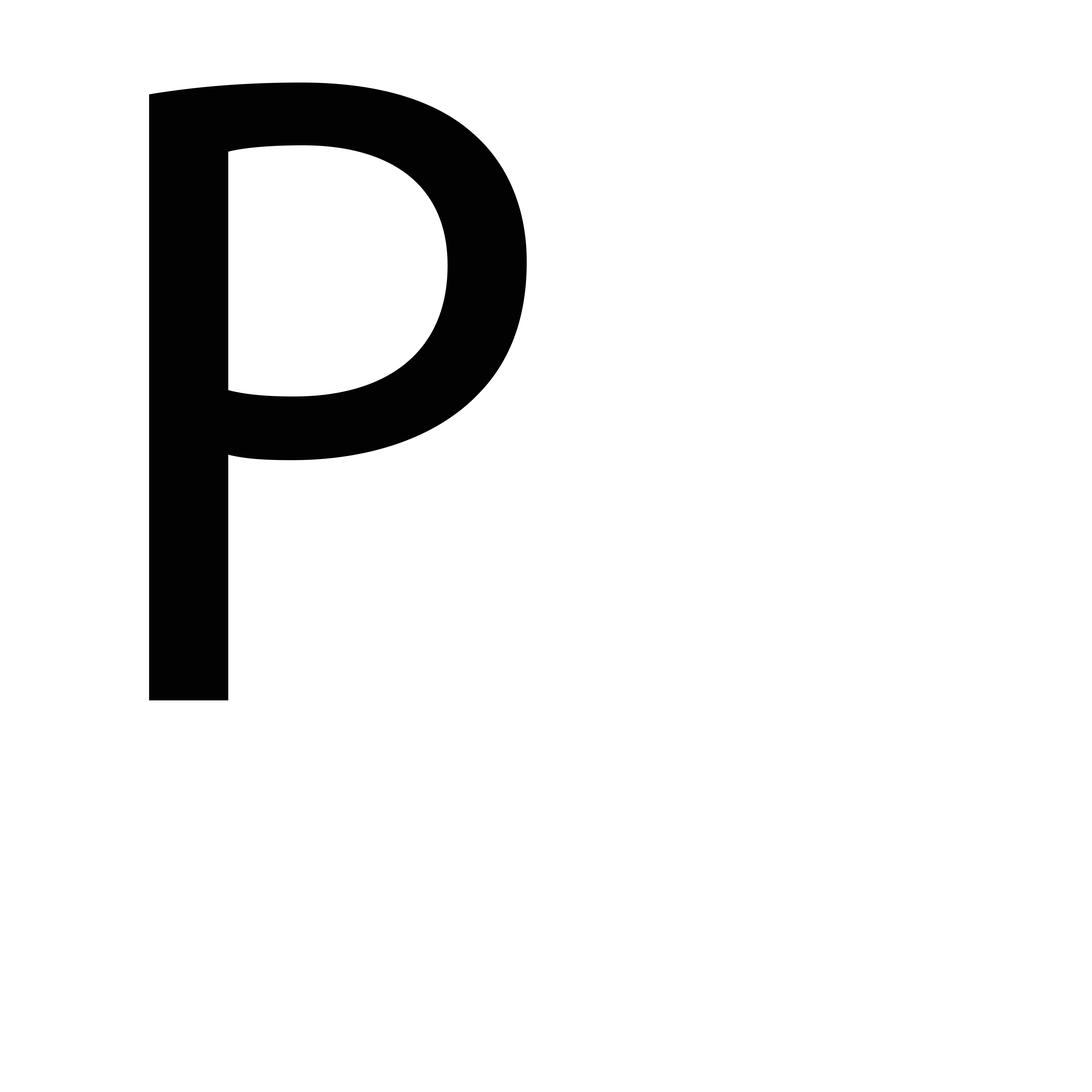
<style>
.page{position:relative;width:1092px;height:1092px;background:#ffffff}
.page>*{position:absolute;margin:0}
.t1{font:910px "MyriadPro-Regular";color:#020202}
</style>
<div class="page">
<p class="t1" style="left:149px;top:82px;width:378px;height:618px">P</p>
</div>
